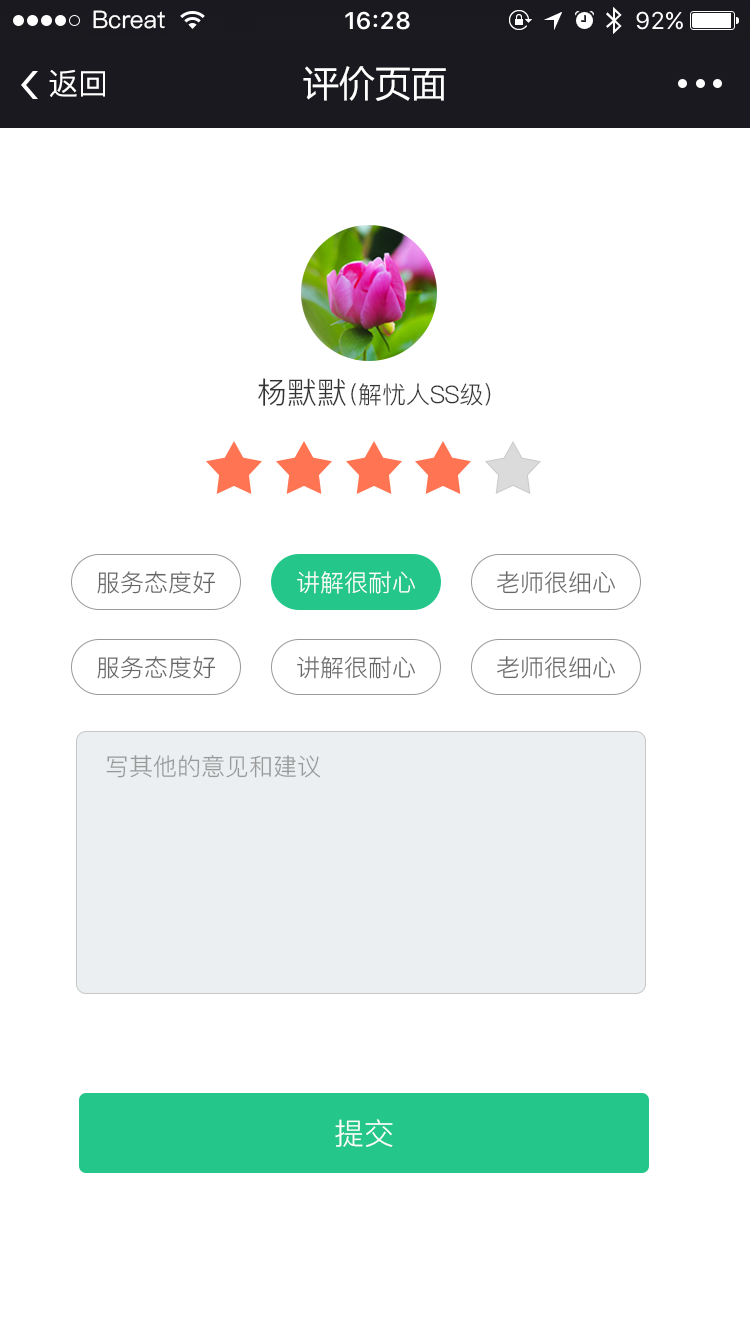
<style>
.page{position:relative;width:750px;height:1334px;background:#ffffff}
.page>*{position:absolute;margin:0}
.t1{font:24px "PingFang-SC-Medium";color:#ffffff}
.t2{font:30px "PingFang-SC-Medium";color:#ffffff}
.t3{font:36px "MicrosoftYaHei";color:#ffffff}
.t4{font:24px "PingFang-SC-Regular";color:#333333}
.t5{font:30px "PingFang-SC-Regular";color:#333333}
.t6{font:24px "PingFang-SC-Regular";color:#666666}
.t7{font:24px "PingFang-SC-Regular";color:#ffffff}
.t8{font:24px "PingFang-SC-Regular";color:#999999}
.t9{font:30px "PingFang-SC-Regular";color:#ffffff}
</style>
<div class="page">
<p class="t1" style="left:93px;top:10px;width:72px;height:19px">Bcreat</p>
<p class="t2" style="left:49px;top:69px;width:56px;height:28px">返回</p>
<p class="t3" style="left:303px;top:66px;width:143px;height:35px">评价页面</p>
<p class="t4" style="left:258px;top:378px;width:233px;height:28px"><span class="t5">杨默默</span>（解忧人SS级）</p>
<p class="t6" style="left:97px;top:571px;width:119px;height:23px">服务态度好</p>
<p class="t7" style="left:297px;top:571px;width:118px;height:23px">讲解很耐心</p>
<p class="t6" style="left:497px;top:571px;width:118px;height:23px">老师很细心</p>
<p class="t6" style="left:97px;top:656px;width:119px;height:23px">服务态度好</p>
<p class="t6" style="left:297px;top:656px;width:118px;height:23px">讲解很耐心</p>
<p class="t6" style="left:497px;top:656px;width:118px;height:23px">老师很细心</p>
<p class="t8" style="left:106px;top:755px;width:215px;height:23px">写其他的意见和建议</p>
<p class="t9" style="left:335px;top:1119px;width:58px;height:28px">提交</p>
</div>
